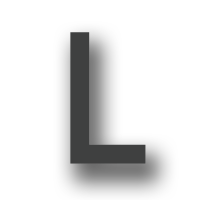
<style>
.page{position:relative;width:215px;height:200px;background:#ffffff}
.page>*{position:absolute;margin:0}
.t1{font:150px "Manteka";color:#3f4040}
</style>
<div class="page">
<p class="t1" style="left:70px;top:32px;width:76px;height:132px">L</p>
</div>
